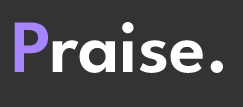
<style>
.page{position:relative;width:243px;height:107px;background:#333333}
.page>*{position:absolute;margin:0}
.t1{font:75px "LeagueSpartan-SemiBold";color:#ffffff}
.t2{font:75px "LeagueSpartan-SemiBold";color:#a785ff}
</style>
<div class="page">
<p class="t1" style="left:14px;top:22px;width:209px;height:51px"><span class="t2">P</span>raise.<br>..</p>
</div>
